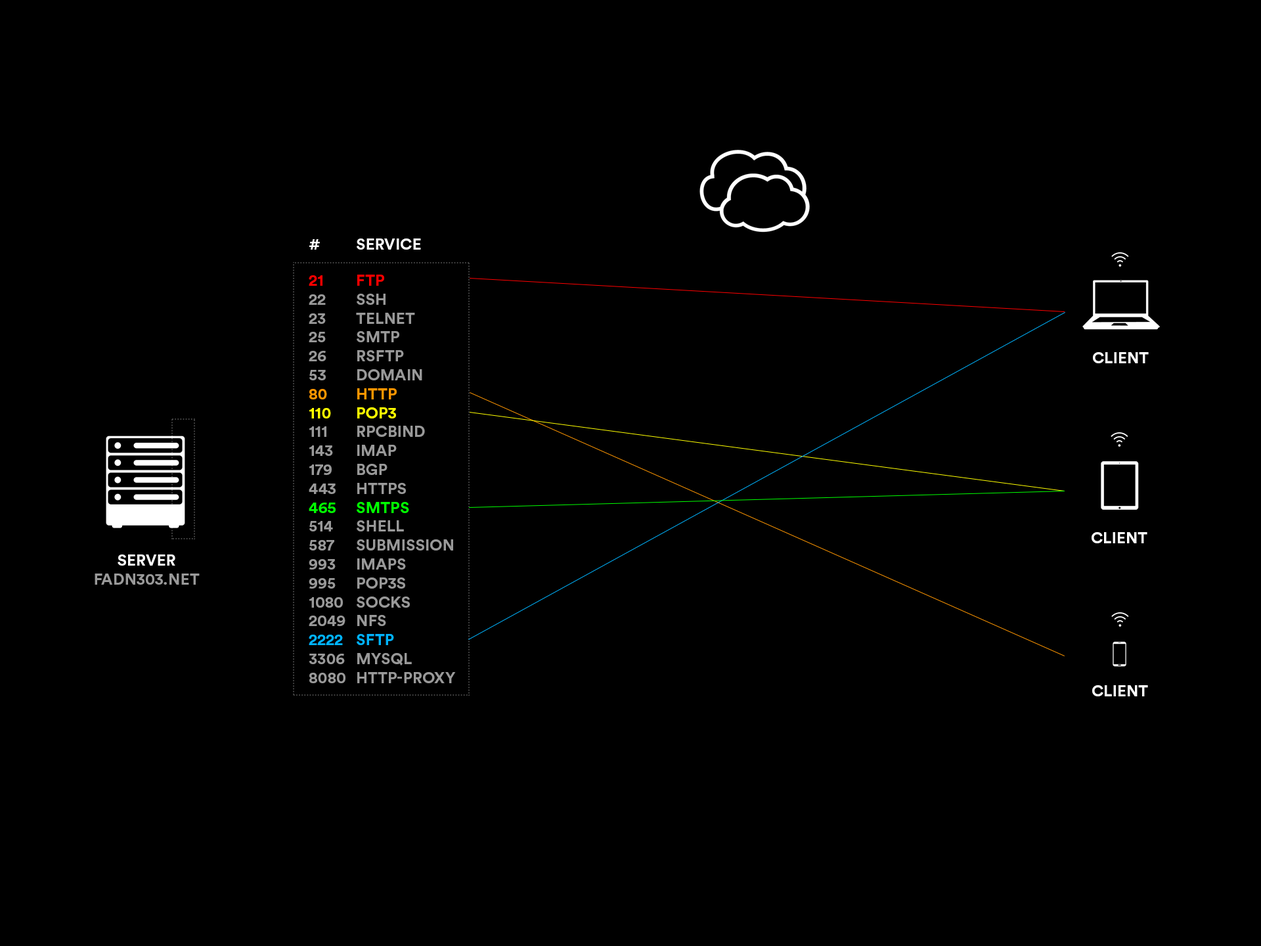
<style>
.page{position:relative;width:1261px;height:946px;background:#000000}
.page>*{position:absolute;margin:0}
.t1{font:15.8px "CircularStd-Bold";color:#ffffff;text-transform:uppercase}
.t2{font:15.8px "CircularStd-Bold";color:#999999;text-transform:uppercase}
.t3{font:15.8px "CircularStd-Bold";color:#ff0000;text-transform:uppercase}
.t4{font:15.8px "CircularStd-Bold";color:#ff9600;text-transform:uppercase}
.t5{font:15.8px "CircularStd-Bold";color:#ffff00;text-transform:uppercase}
.t6{font:15.8px "CircularStd-Bold";color:#00ff00;text-transform:uppercase}
.t7{font:15.8px "CircularStd-Bold";color:#00b4ff;text-transform:uppercase}
</style>
<div class="page">
<p class="t1" style="left:309px;top:238px;width:112px;height:12px">#  service</p>
<p class="t2" style="left:309px;top:275px;width:147px;height:408px"><span class="t3">21  ftp<br></span>22  ssh<br>23  telnet<br>25  smtp<br>26  rsftp<br>53  domain<br><span class="t4">80  http<br></span><span class="t5">110  pop3<br></span>111  rpcbind<br>143 imap<br>179 bgp<br>443 https<br><span class="t6">465 smtps<br></span>514 shell<br>587 submission<br>993 imaps<br>995 pop3s<br>1080 socks<br>2049 nfs<br><span class="t7">2222 sftp<br></span>3306 mysql<br>8080 http-proxy</p>
<p class="t1" style="left:1093px;top:352px;width:56px;height:11px">client</p>
<p class="t1" style="left:1091px;top:532px;width:56px;height:11px">client</p>
<p class="t2" style="left:95px;top:554px;width:105px;height:30px;text-align:center"><span class="t1">Server<br></span>fadn303.net</p>
<p class="t1" style="left:1092px;top:685px;width:56px;height:11px">client</p>
</div>
